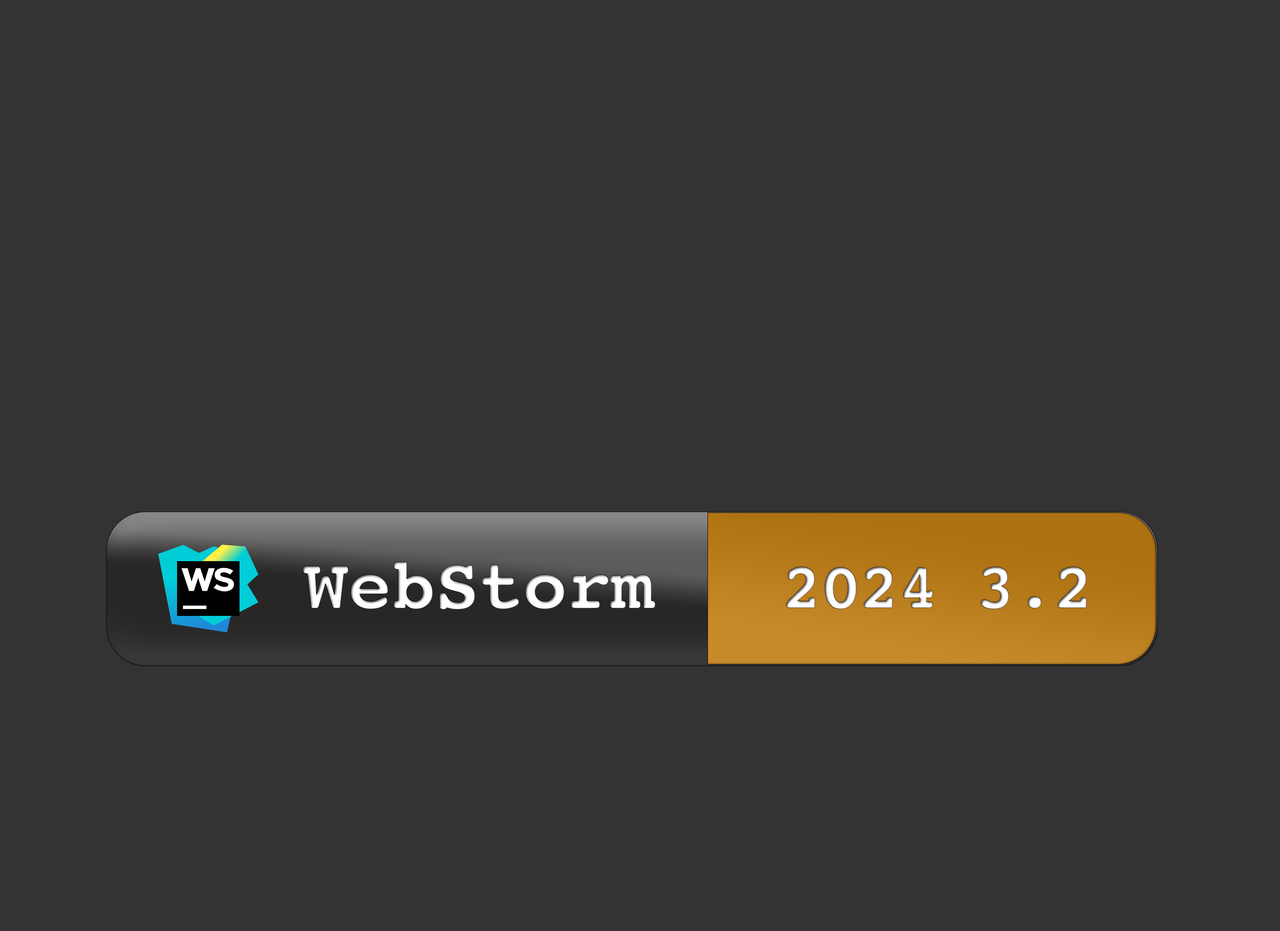
<style>
.page{position:relative;width:1280px;height:931px;background:#333333}
.page>*{position:absolute;margin:0}
.t1{font:72.8px "Courier-Bold";color:#ffffff}
.t2{font:64.7px "Courier-Bold";color:#ffffff}
</style>
<div class="page">
<p class="t1" style="left:303px;top:562px;width:353px;height:48px">WebStorm</p>
<p class="t2" style="left:787px;top:567px;width:300px;height:42px">2024 3.2</p>
</div>
